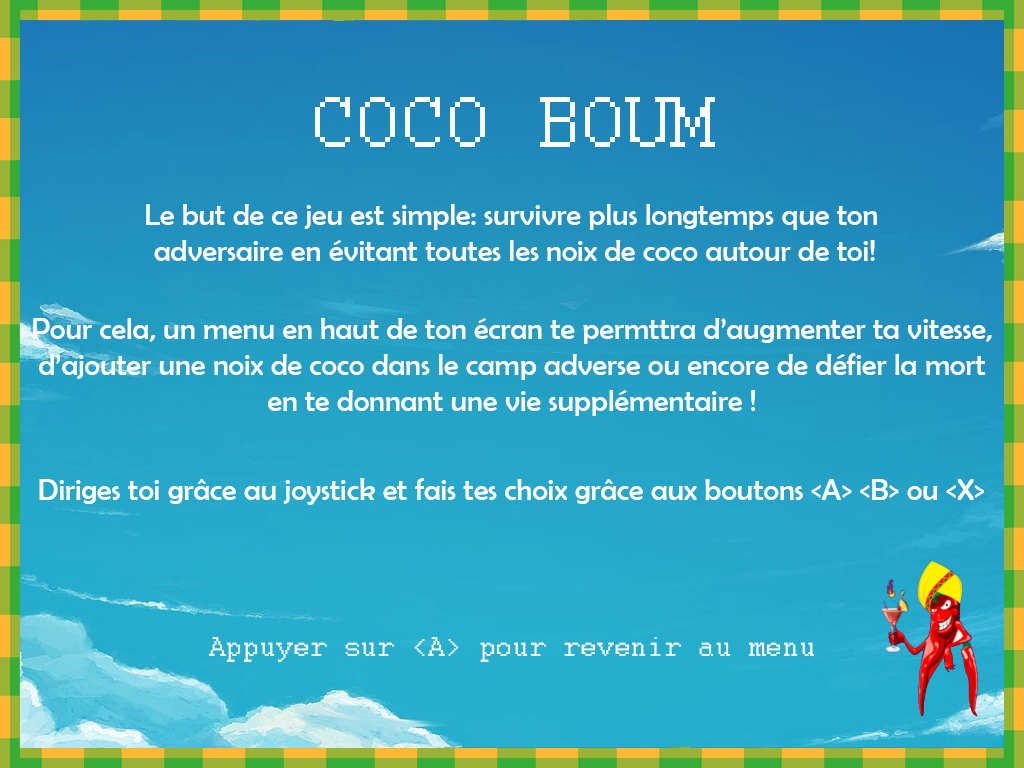
<style>
.page{position:relative;width:1024px;height:768px}
.page>*{position:absolute;margin:0}
.t1{font:80px "Courier";color:#ffffff}
.t2{font:30px "BerlinSansFB-Reg";color:#ffffff}
.t3{font:30px "Courier";color:#ffffff}
</style>
<div class="page">
<p class="t1" style="left:315px;top:97px;width:400px;height:50px">COCO BOUM</p>
<p class="t2" style="left:146px;top:204px;width:731px;height:57px;text-align:center">Le but de ce jeu est simple: survivre plus longtemps que ton <br>adversaire en évitant toutes les noix de coco autour de toi!</p>
<p class="t2" style="left:33px;top:318px;width:959px;height:98px;text-align:center">Pour cela, un menu en haut de ton écran te permttra d’augmenter ta vitesse,<br>d’ajouter une noix de coco dans le camp adverse ou encore de défier la mort<br>en te donnant une vie supplémentaire !</p>
<p class="t2" style="left:39px;top:478px;width:945px;height:27px">Diriges toi grâce au joystick et fais tes choix grâce aux boutons &lt;A&gt; &lt;B&gt; ou &lt;X&gt;</p>
<p class="t3" style="left:208px;top:637px;width:607px;height:25px">Appuyer sur &lt;A&gt; pour revenir au menu</p>
</div>
